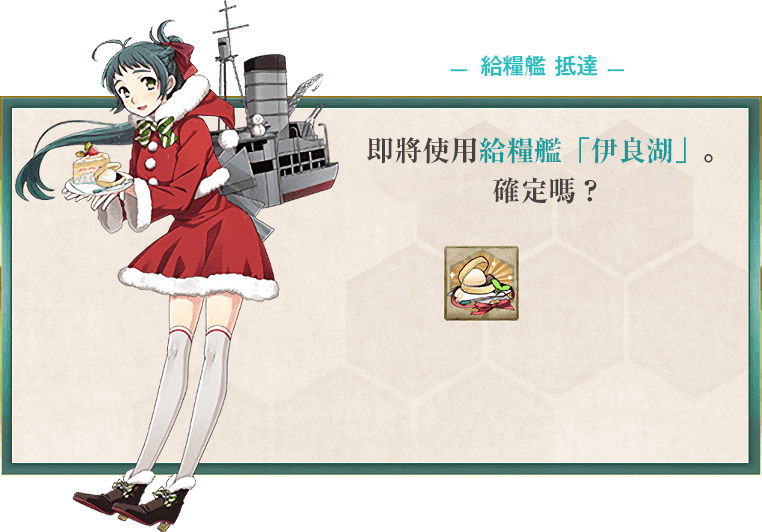
<style>
.page{position:relative;width:762px;height:532px;background:#ffffff}
.page>*{position:absolute;margin:0}
.t1{font:22px "GothicMB101Pr6N-Medium";color:#2bbcbe}
.t2{font:28px/40px "RyuminPr6N-ExBold";color:#199a9c}
.t3{font:28px/40px "RyuminPr6N-ExBold";color:#46423f}
</style>
<div class="page">
<p class="t1" style="left:481px;top:54px;width:117px;height:23px">給糧艦 抵達</p>
<p class="t2" style="left:367px;top:137px;width:346px;height:67px;text-align:center"><span class="t3">即將使用</span>給糧艦「伊良湖」<span class="t3">。<br>確定嗎？</span></p>
</div>
